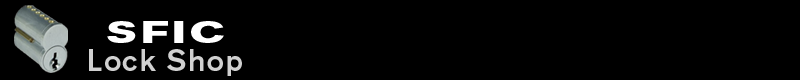
<style>
.page{position:relative;width:800px;height:80px;background:#000000}
.page>*{position:absolute;margin:0}
.t1{font:30px "AkzidenzGroteskBQ-BoldExt";letter-spacing:0.12em;color:#ffffff;scale:1.2 1}
.t2{font:30px "AkzidenzGroteskBQ-Medium";letter-spacing:0.04em;color:#d0d0d0}
</style>
<div class="page">
<p class="t1" style="left:107px;top:21px;width:117px;height:22px">SFIC</p>
<p class="t2" style="left:89px;top:49px;width:153px;height:27px">Lock Shop</p>
</div>
